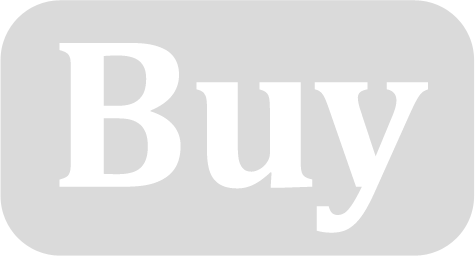
<style>
.page{position:relative;width:475px;height:256px;background:#dadada}
.page>*{position:absolute;margin:0}
.t1{font:215.4px "Cambria-Bold";color:#ffffff}
</style>
<div class="page">
<p class="t1" style="left:59px;top:43px;width:369px;height:190px">Buy</p>
</div>
